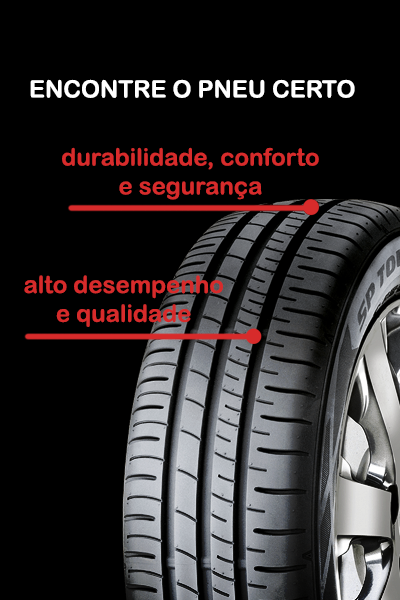
<style>
.page{position:relative;width:400px;height:600px;background:#000000}
.page>*{position:absolute;margin:0}
.t1{font:24px "ArialRoundedMTBold";color:#ffffff}
.t2{font:24px "ArialRoundedMTBold";color:#d72b2b}
</style>
<div class="page">
<p class="t1" style="left:30px;top:79px;width:325px;height:19px">ENCONTRE O PNEU CERTO</p>
<p class="t2" style="left:62px;top:147px;width:257px;height:53px;text-align:center">durabilidade, conforto e segurança</p>
<p class="t2" style="left:24px;top:275px;width:199px;height:52px;text-align:center">alto desempenho e qualidade</p>
</div>
